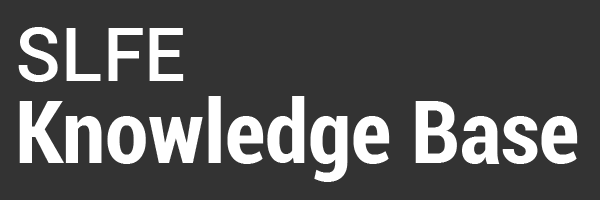
<style>
.page{position:relative;width:600px;height:200px;background:#333333}
.page>*{position:absolute;margin:0}
.t1{font:75px "Roboto-Medium";color:#ffffff}
.t2{font:87.5px "Roboto-BoldCondensed";color:#ffffff}
</style>
<div class="page">
<p class="t1" style="left:18px;top:27px;width:166px;height:55px">SLFE</p>
<p class="t2" style="left:19px;top:96px;width:559px;height:86px">Knowledge Base</p>
</div>
